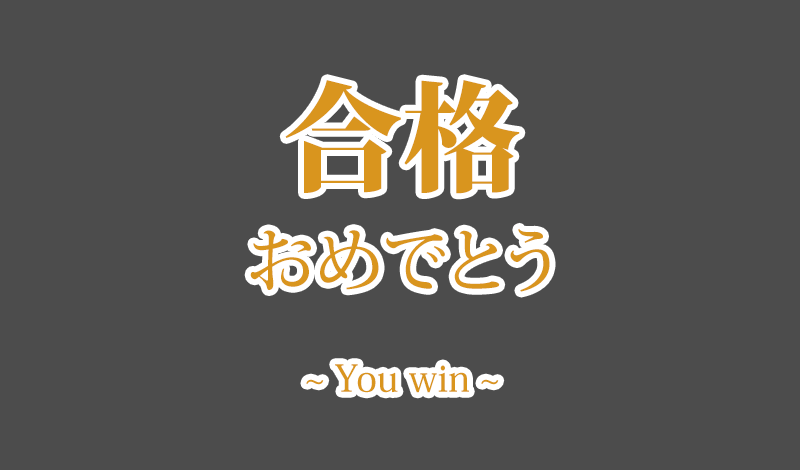
<style>
.page{position:relative;width:800px;height:470px;background:#4c4c4c}
.page>*{position:absolute;margin:0}
.t1{font:37px/105px "KozMinPr6N-Medium";color:#d9951e}
.t2{font:118px/105px "KozMinPr6N-Heavy";color:#d9951e}
.t3{font:70px/105px "KozMinPr6N-Medium";color:#d9951e}
</style>
<div class="page">
<p class="t1" style="left:250px;top:80px;width:300px;height:313px;text-align:center"><span class="t2">合格<br></span><span class="t3">おめでとう<br></span>~ You win ~</p>
</div>
